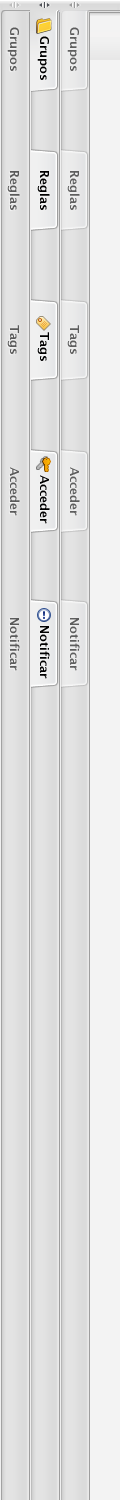
<style>
.page{position:relative;width:120px;height:1500px;background:#f3f3f3}
.page>*{position:absolute;margin:0}
.t1{font:12px "LucidaGrande-Bold";color:#5a5a5a}
.t2{font:12px "LucidaGrande-Bold";color:#5e5e5e}
.t3{font:12px "LucidaGrande-Bold";color:#000000}
</style>
<div class="page">
<p class="t1" style="left:7px;top:27px;width:12px;height:44px;rotate:90deg">Grupos</p>
<p class="t2" style="left:67px;top:27px;width:12px;height:44px;rotate:90deg">Grupos</p>
<p class="t3" style="left:37px;top:36px;width:12px;height:44px;rotate:90deg">Grupos</p>
<p class="t1" style="left:7px;top:171px;width:13px;height:39px;rotate:90deg">Reglas</p>
<p class="t3" style="left:37px;top:171px;width:13px;height:39px;rotate:90deg">Reglas</p>
<p class="t2" style="left:67px;top:171px;width:13px;height:39px;rotate:90deg">Reglas</p>
<p class="t1" style="left:7px;top:325px;width:12px;height:29px;rotate:90deg">Tags</p>
<p class="t2" style="left:67px;top:325px;width:12px;height:29px;rotate:90deg">Tags</p>
<p class="t3" style="left:37px;top:332px;width:12px;height:29px;rotate:90deg">Tags</p>
<p class="t1" style="left:10px;top:467px;width:10px;height:49px;rotate:90deg">Acceder</p>
<p class="t2" style="left:70px;top:467px;width:10px;height:49px;rotate:90deg">Acceder</p>
<p class="t3" style="left:40px;top:475px;width:10px;height:49px;rotate:90deg">Acceder</p>
<p class="t1" style="left:10px;top:618px;width:10px;height:53px;rotate:90deg">Notificar</p>
<p class="t3" style="left:40px;top:626px;width:10px;height:53px;rotate:90deg">Notificar</p>
<p class="t2" style="left:70px;top:618px;width:10px;height:53px;rotate:90deg">Notificar</p>
</div>
